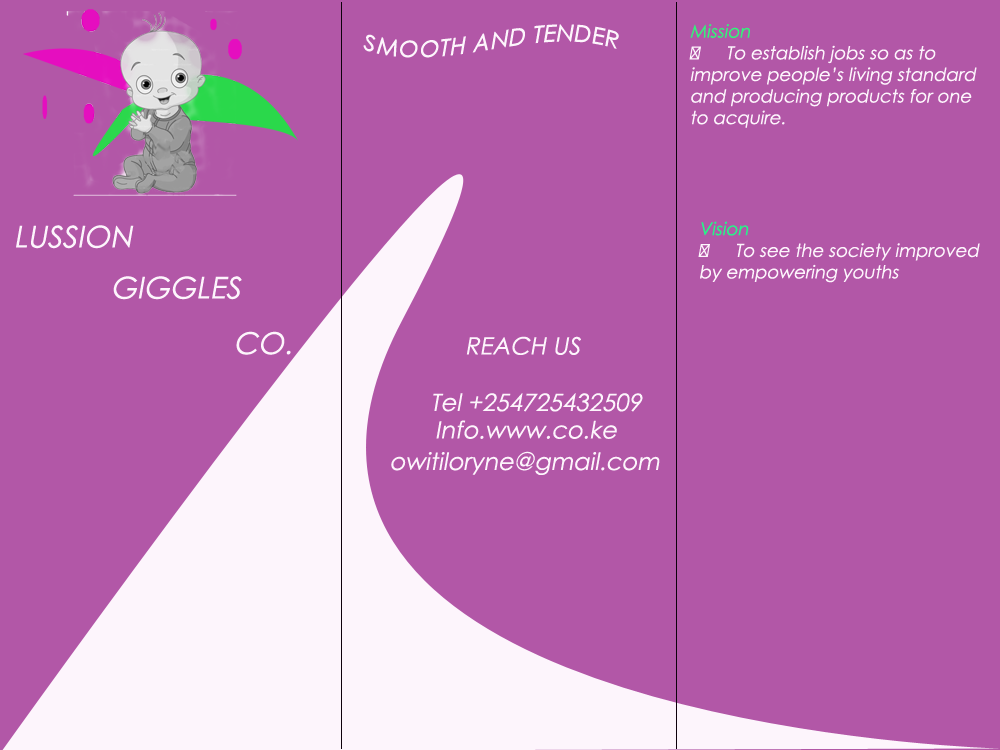
<style>
.page{position:relative;width:1000px;height:750px;background:#b257a7}
.page>*{position:absolute;margin:0}
.t1{font:24px "CenturyGothic";color:#fdf5fc;font-style:italic}
.t2{font:30px "CenturyGothic";color:#fdf5fc;font-style:italic}
</style>
<div class="page">
<p class="t1" style="left:363px;top:24px;width:256px;height:34px">SMOOTH AND TENDER</p>
<p class="t2" style="left:16px;top:225px;width:118px;height:24px">LUSSION</p>
<p class="t2" style="left:113px;top:276px;width:129px;height:24px">GIGGLES</p>
<p class="t2" style="left:236px;top:331px;width:55px;height:24px">CO.</p>
<p class="t1" style="left:466px;top:336px;width:115px;height:19px">REACH US</p>
<p class="t1" style="left:433px;top:393px;width:210px;height:19px">Tel +254725432509</p>
<p class="t1" style="left:436px;top:420px;width:181px;height:19px">Info.www.co.ke</p>
<p class="t1" style="left:391px;top:451px;width:269px;height:24px">owitiloryne@gmail.com</p>
</div>
